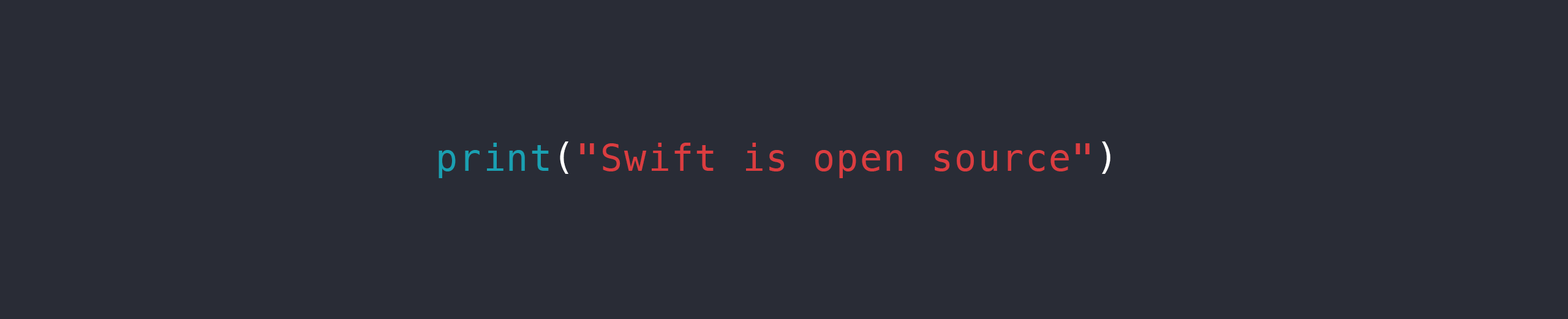
<style>
.page{position:relative;width:1568px;height:319px;background:#292c36}
.page>*{position:absolute;margin:0}
.t1{font:36.8px "Menlo-Regular";letter-spacing:0.04em;color:#db3d40}
.t2{font:36.8px "Menlo-Regular";letter-spacing:0.04em;color:#1aa0b2}
.t3{font:36.8px "Menlo-Regular";letter-spacing:0.04em;color:#ffffff}
</style>
<div class="page">
<p class="t1" style="left:439px;top:141px;width:671px;height:37px"><span class="t2">print</span><span class="t3">(</span>"Swift is open source"<span class="t3">)</span></p>
</div>
